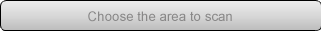
<style>
.page{position:relative;width:321px;height:35px}
.page>*{position:absolute;margin:0}
.t1{font:13.3px "ArialMT";color:#898888}
</style>
<div class="page">
<p class="t1" style="left:88px;top:11px;width:144px;height:11px">Choose the area to scan</p>
</div>
